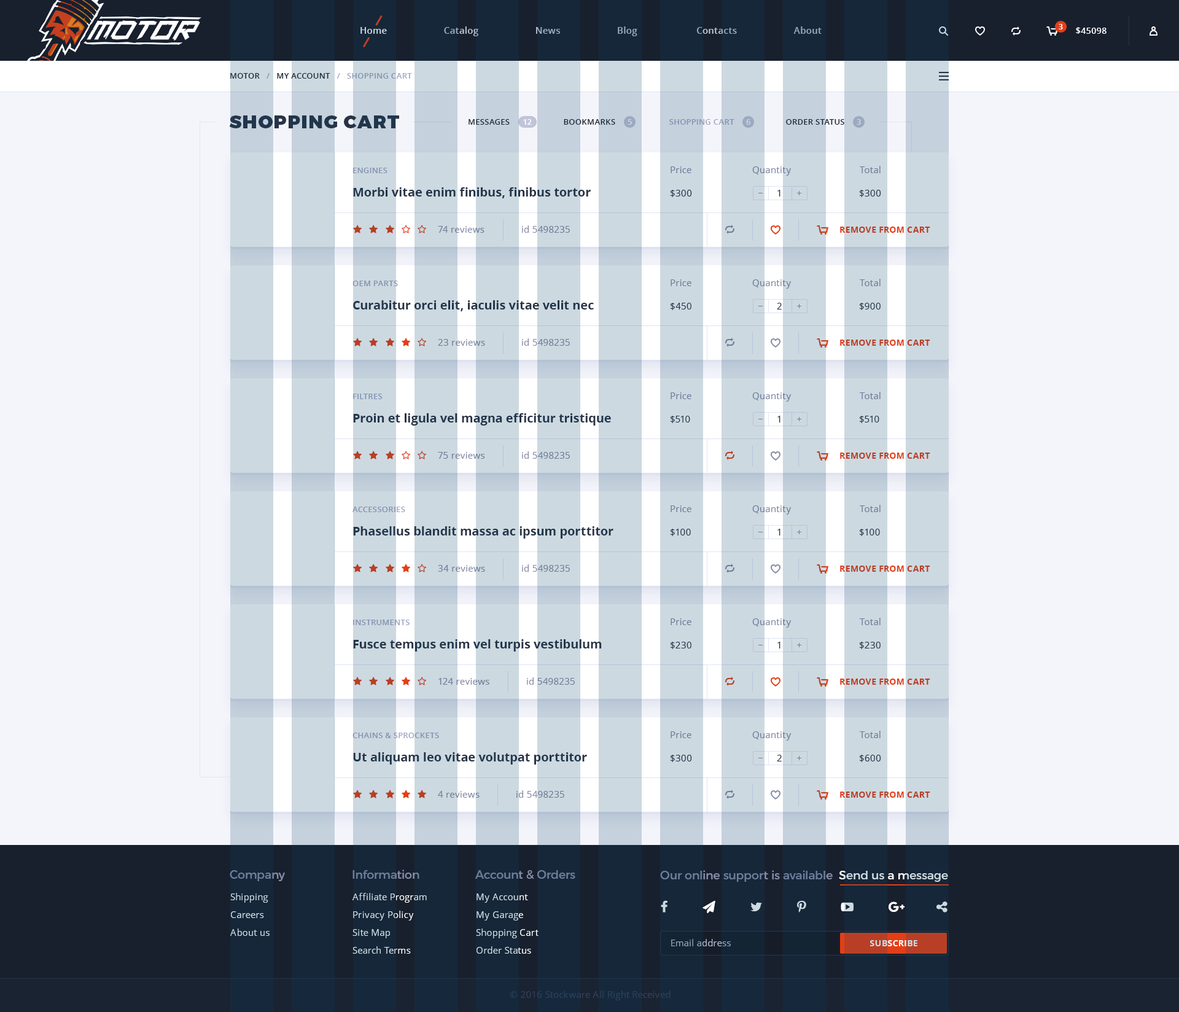
<style>
.page{position:relative;width:1179px;height:1012px;background:#f4f5fb}
.page>*{position:absolute;margin:0}
.t1{font:9.2px "OpenSans-Semibold";letter-spacing:0.02em}
.t2{font:7.4px "OpenSans-Bold";color:#ffffff}
.t3{font:8.6px "OpenSans-Semibold";letter-spacing:0.02em;color:#ffffff;text-transform:uppercase}
.t4{font:8px "OpenSans-Semibold";letter-spacing:0.02em;text-transform:uppercase}
.t5{font:18.4px "Montserrat-Black";letter-spacing:0.06em;color:#283346;text-transform:uppercase}
.t6{font:8px "OpenSans-Semibold";letter-spacing:0.02em;color:#18202e;text-transform:uppercase}
.t7{font:8px "OpenSans-Semibold";letter-spacing:0.02em;color:#a0a6c5;text-transform:uppercase}
.t8{font:8px "OpenSans-Semibold";letter-spacing:0.02em;color:#ffffff;text-transform:uppercase}
.t9{font:8px "OpenSans-Semibold";letter-spacing:0.02em;color:#cdd9e0;text-transform:uppercase}
.t10{font:8px "OpenSans-Semibold";letter-spacing:0.02em;color:#8192b1;text-transform:uppercase}
.t11{font:9.2px "OpenSans";letter-spacing:0.02em;color:#6d7d99}
.t12{font:9.2px "OpenSans";letter-spacing:0.02em}
.t13{font:12.3px "OpenSans-Bold";color:#283346}
.t14{font:9.2px "OpenSans";letter-spacing:0.02em;color:#283346}
.t15{font:8.6px "OpenSans-Bold";letter-spacing:0.02em;color:#b83f25;text-transform:uppercase}
.t16{font:9.2px "OpenSans";letter-spacing:0.02em;color:#868ca7}
.t17{font:11.7px "Montserrat-Regular";color:#6d7d99}
.t18{font:11.7px "Montserrat-Regular"}
.t19{font:9.2px/17.8px "OpenSans";letter-spacing:0.02em;color:#cdd9e0}
.t20{font:8.6px "OpenSans-Bold";letter-spacing:0.02em}
.t21{font:9.2px "OpenSans";letter-spacing:0.02em;color:#324057}
</style>
<div class="page">
<p class="t1" style="left:360px;top:26px;width:461px;height:10px">Home                      Catalog                      News                      Blog                       Contacts                      About</p>
<p class="t2" style="left:1058px;top:24px;width:5px;height:5px">3</p>
<p class="t3" style="left:1076px;top:27px;width:30px;height:7px">$45098</p>
<p class="t4" style="left:230px;top:73px;width:182px;height:6px">Motor   /   My Account   /   Shopping Cart</p>
<p class="t5" style="left:229px;top:115px;width:170px;height:13px">shopping cart</p>
<p class="t6" style="left:468px;top:119px;width:376px;height:6px">Messages                        Bookmarks                        <span class="t7">Shopping Cart       </span>                Order Status</p>
<p class="t8" style="left:523px;top:119px;width:9px;height:6px">12</p>
<p class="t9" style="left:627px;top:119px;width:5px;height:6px">5</p>
<p class="t9" style="left:746px;top:119px;width:4px;height:6px">6</p>
<p class="t9" style="left:856px;top:119px;width:5px;height:6px">3</p>
<p class="t10" style="left:353px;top:168px;width:34px;height:5px">Engines</p>
<p class="t11" style="left:670px;top:166px;width:21px;height:7px">Price</p>
<p class="t12" style="left:752px;top:166px;width:39px;height:10px">Quantity</p>
<p class="t11" style="left:859px;top:166px;width:21px;height:7px">Total</p>
<p class="t13" style="left:353px;top:187px;width:238px;height:11px">Morbi vitae enim finibus, finibus tortor</p>
<p class="t14" style="left:670px;top:190px;width:22px;height:7px">$300</p>
<p class="t14" style="left:777px;top:190px;width:3px;height:6px">1</p>
<p class="t14" style="left:859px;top:190px;width:22px;height:7px">$300</p>
<p class="t12" style="left:438px;top:226px;width:46px;height:7px">74 reviews</p>
<p class="t12" style="left:522px;top:225px;width:48px;height:8px">id 5498235</p>
<p class="t15" style="left:840px;top:227px;width:90px;height:6px">remove from cart</p>
<p class="t10" style="left:352px;top:281px;width:46px;height:5px">OEM Parts</p>
<p class="t11" style="left:670px;top:279px;width:21px;height:7px">Price</p>
<p class="t12" style="left:752px;top:279px;width:39px;height:10px">Quantity</p>
<p class="t11" style="left:859px;top:279px;width:21px;height:7px">Total</p>
<p class="t13" style="left:353px;top:300px;width:241px;height:11px">Curabitur orci elit, iaculis vitae velit nec</p>
<p class="t14" style="left:670px;top:303px;width:21px;height:7px">$450</p>
<p class="t14" style="left:777px;top:303px;width:4px;height:6px">2</p>
<p class="t14" style="left:859px;top:303px;width:21px;height:7px">$900</p>
<p class="t12" style="left:438px;top:339px;width:47px;height:7px">23 reviews</p>
<p class="t12" style="left:522px;top:338px;width:48px;height:8px">id 5498235</p>
<p class="t15" style="left:840px;top:339px;width:90px;height:7px">remove from cart</p>
<p class="t10" style="left:353px;top:394px;width:29px;height:5px">Filtres</p>
<p class="t11" style="left:670px;top:392px;width:21px;height:7px">Price</p>
<p class="t12" style="left:752px;top:392px;width:39px;height:9px">Quantity</p>
<p class="t11" style="left:859px;top:392px;width:21px;height:7px">Total</p>
<p class="t13" style="left:353px;top:413px;width:258px;height:12px">Proin et ligula vel magna efficitur tristique</p>
<p class="t14" style="left:670px;top:416px;width:20px;height:7px">$510</p>
<p class="t14" style="left:777px;top:416px;width:3px;height:6px">1</p>
<p class="t14" style="left:859px;top:416px;width:20px;height:7px">$510</p>
<p class="t12" style="left:438px;top:452px;width:47px;height:7px">75 reviews</p>
<p class="t12" style="left:522px;top:451px;width:48px;height:8px">id 5498235</p>
<p class="t15" style="left:840px;top:452px;width:90px;height:7px">remove from cart</p>
<p class="t10" style="left:352px;top:506px;width:53px;height:6px">Accessories</p>
<p class="t11" style="left:670px;top:505px;width:21px;height:7px">Price</p>
<p class="t12" style="left:752px;top:505px;width:39px;height:9px">Quantity</p>
<p class="t11" style="left:859px;top:505px;width:21px;height:7px">Total</p>
<p class="t13" style="left:353px;top:526px;width:260px;height:12px">Phasellus blandit massa ac ipsum porttitor</p>
<p class="t14" style="left:670px;top:529px;width:21px;height:7px">$100</p>
<p class="t14" style="left:777px;top:529px;width:3px;height:6px">1</p>
<p class="t14" style="left:859px;top:529px;width:21px;height:7px">$100</p>
<p class="t12" style="left:438px;top:565px;width:47px;height:7px">34 reviews</p>
<p class="t12" style="left:522px;top:564px;width:48px;height:8px">id 5498235</p>
<p class="t15" style="left:840px;top:565px;width:90px;height:7px">remove from cart</p>
<p class="t11" style="left:859px;top:618px;width:21px;height:7px">Total</p>
<p class="t10" style="left:353px;top:619px;width:56px;height:6px">Instruments</p>
<p class="t11" style="left:670px;top:618px;width:21px;height:7px">Price</p>
<p class="t12" style="left:752px;top:618px;width:39px;height:9px">Quantity</p>
<p class="t13" style="left:353px;top:639px;width:249px;height:12px">Fusce tempus enim vel turpis vestibulum</p>
<p class="t14" style="left:670px;top:642px;width:21px;height:7px">$230</p>
<p class="t14" style="left:777px;top:642px;width:3px;height:6px">1</p>
<p class="t14" style="left:859px;top:642px;width:21px;height:7px">$230</p>
<p class="t12" style="left:438px;top:678px;width:51px;height:6px">124 reviews</p>
<p class="t11" style="left:527px;top:677px;width:48px;height:7px">id 5498235</p>
<p class="t15" style="left:840px;top:678px;width:90px;height:6px">remove from cart</p>
<p class="t10" style="left:352px;top:732px;width:87px;height:6px">Chains &amp; Sprockets</p>
<p class="t11" style="left:670px;top:731px;width:21px;height:7px">Price</p>
<p class="t12" style="left:752px;top:731px;width:39px;height:9px">Quantity</p>
<p class="t11" style="left:859px;top:731px;width:21px;height:7px">Total</p>
<p class="t13" style="left:353px;top:752px;width:234px;height:12px">Ut aliquam leo vitae volutpat porttitor</p>
<p class="t14" style="left:670px;top:754px;width:22px;height:8px">$300</p>
<p class="t14" style="left:777px;top:754px;width:4px;height:7px">2</p>
<p class="t14" style="left:859px;top:754px;width:22px;height:8px">$600</p>
<p class="t16" style="left:438px;top:791px;width:41px;height:6px">4 reviews</p>
<p class="t12" style="left:516px;top:790px;width:48px;height:7px">id 5498235</p>
<p class="t15" style="left:840px;top:791px;width:90px;height:6px">remove from cart</p>
<p class="t17" style="left:230px;top:870px;width:55px;height:11px">Company</p>
<p class="t17" style="left:352px;top:869px;width:67px;height:9px">Information</p>
<p class="t17" style="left:475px;top:870px;width:100px;height:9px">Account &amp; Orders</p>
<p class="t18" style="left:660px;top:870px;width:288px;height:12px">Our online support is available  Send us a message</p>
<p class="t19" style="left:230px;top:893px;width:39px;height:43px">Shipping<br>Careers<br>About us</p>
<p class="t19" style="left:352px;top:893px;width:75px;height:60px">Affiliate Program<br>Privacy Policy<br>Site Map<br>Search Terms</p>
<p class="t19" style="left:476px;top:893px;width:62px;height:60px">My Account<br>My Garage<br>Shopping Cart<br>Order Status</p>
<p class="t12" style="left:671px;top:939px;width:60px;height:7px">Email address</p>
<p class="t20" style="left:870px;top:940px;width:47px;height:6px">SUBSCRIBE</p>
<p class="t21" style="left:510px;top:990px;width:160px;height:10px">© 2016 Stockware All Right Received</p>
</div>
